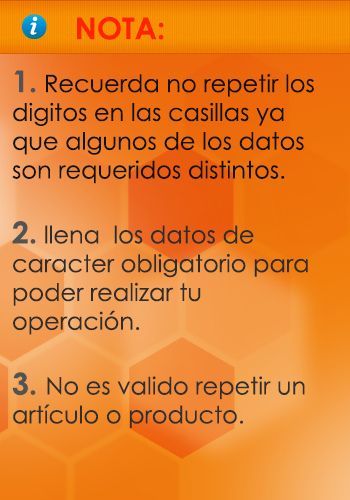
<style>
.page{position:relative;width:350px;height:500px}
.page>*{position:absolute;margin:0}
.t1{font:30px "CenturyGothic-Bold";color:#ff2400}
.t2{font:24px "CenturyGothic";color:#121212}
.t3{font:30px "CenturyGothic-Bold";color:#525352}
.t4{font:24px "CenturyGothic";color:#2c2d2c}
.t5{font:24px "CenturyGothic";color:#2e2f2e}
</style>
<div class="page">
<p class="t1" style="left:77px;top:16px;width:87px;height:24px">NOTA:</p>
<p class="t2" style="left:12px;top:70px;width:302px;height:358px"><span class="t3">1. </span>Recuerda no repetir los digitos en las casillas ya que algunos de los datos son requeridos distintos.<br><br><span class="t3">2. </span><span class="t4">llena  los datos de caracter obligatorio para poder realizar tu operación.<br><br></span><span class="t3">3. </span><span class="t5">No es valido repetir un artículo o producto.</span></p>
</div>
